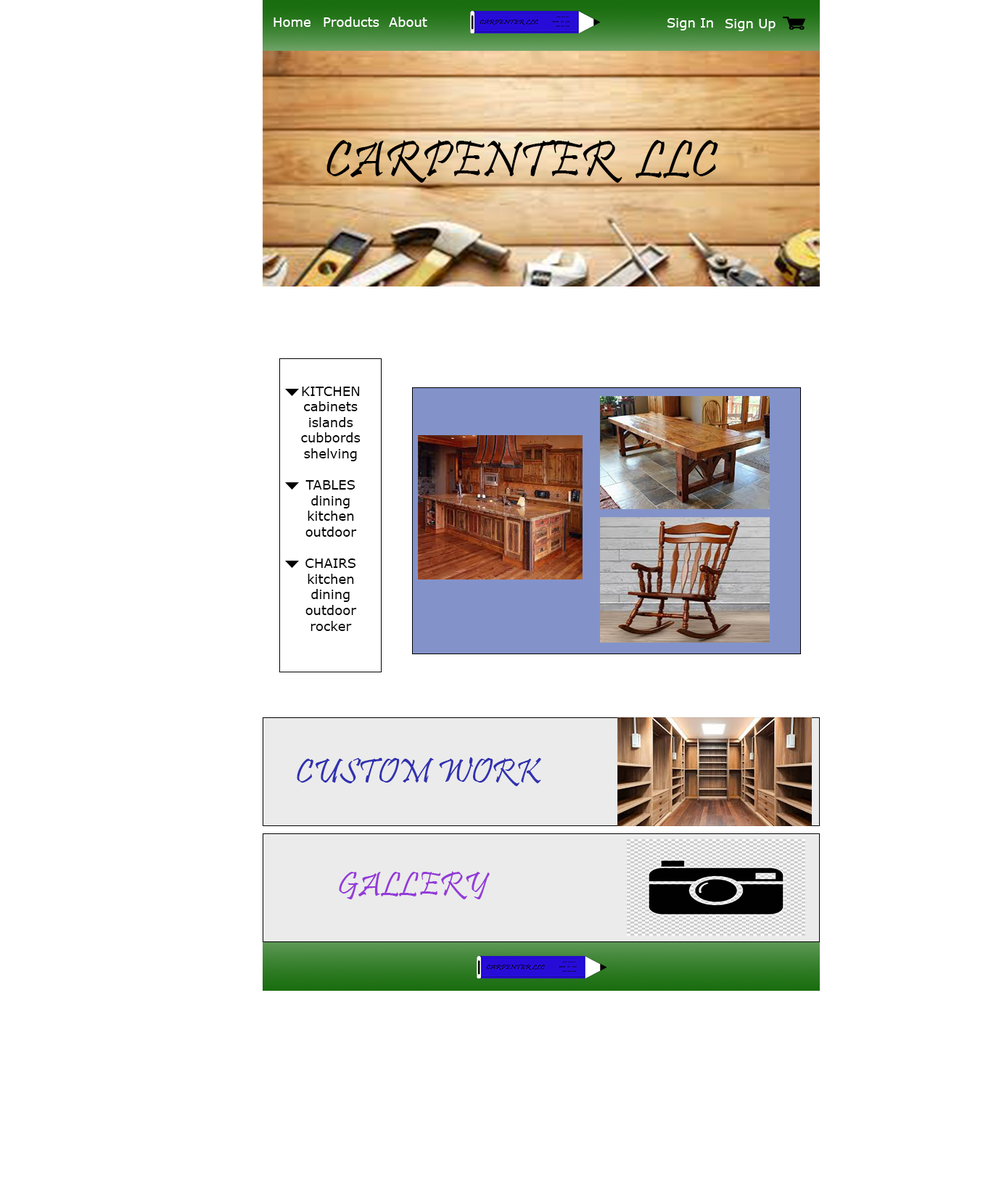
<style>
.page{position:relative;width:991px;height:1204px;background:#ffffff}
.page>*{position:absolute;margin:0}
.t1{font:13.1px "MSReferenceSansSerif";color:#ffffff}
.t2{font:52.2px "Pristina-Regular";color:#000000}
.t3{font:13.1px "MSReferenceSansSerif";color:#000000}
.t4{font:34.8px "Pristina-Regular";color:#3131b1}
.t5{font:34.8px "Pristina-Regular";color:#943bd9}
</style>
<div class="page">
<p class="t1" style="left:273px;top:17px;width:37px;height:10px">Home</p>
<p class="t1" style="left:323px;top:17px;width:56px;height:10px">Products</p>
<p class="t1" style="left:389px;top:17px;width:38px;height:10px">About</p>
<p class="t1" style="left:667px;top:18px;width:46px;height:12px">Sign In</p>
<p class="t1" style="left:725px;top:19px;width:50px;height:12px">Sign Up</p>
<p class="t2" style="left:326px;top:140px;width:392px;height:43px">CARPENTER  LLC</p>
<p class="t3" style="left:301px;top:387px;width:59px;height:244px;text-align:center">KITCHEN<br>cabinets<br>islands<br>cubbords<br>shelving<br><br>TABLES<br>dining<br>kitchen<br>outdoor<br><br>CHAIRS<br>kitchen<br>dining<br>outdoor<br>rocker</p>
<p class="t4" style="left:297px;top:757px;width:244px;height:29px">CUSTOM WORK</p>
<p class="t5" style="left:339px;top:871px;width:150px;height:28px">GALLERY</p>
</div>
